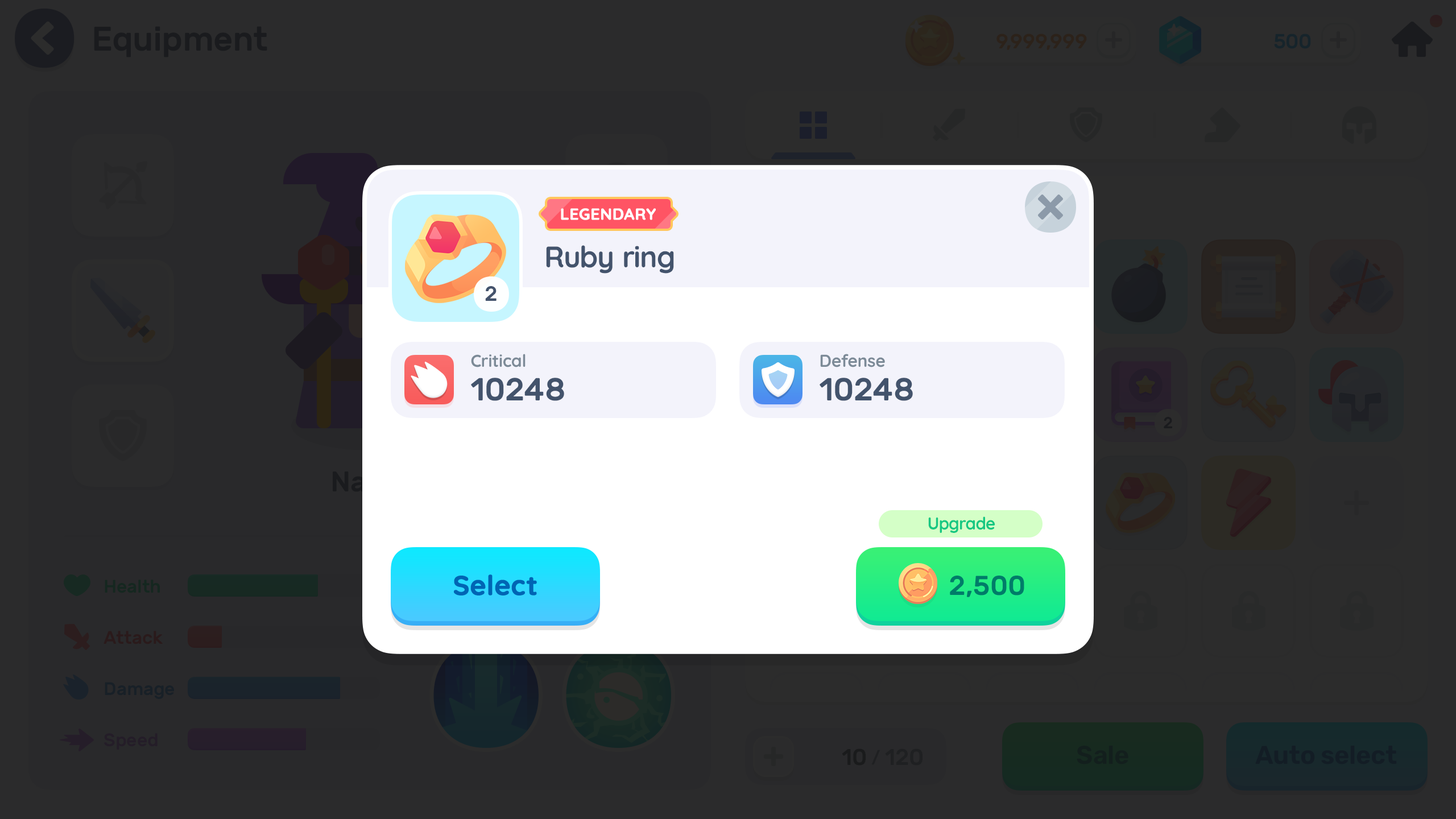
<style>
.page{position:relative;width:1456px;height:819px;background:#2b2b2c}
.page>*{position:absolute;margin:0}
.t1{font:15.9px "Quicksand-Bold";letter-spacing:0.01em;color:#ffffff;text-transform:uppercase;font-weight:bold}
.t2{font:29.6px "Quicksand-Bold";letter-spacing:-0.01em;color:#43536c}
.t3{font:20.7px "Rubik-Medium";letter-spacing:-0.01em;color:#43536c}
.t4{font:17.1px "Quicksand-Bold";letter-spacing:-0.01em;color:#7c8a97}
.t5{font:31.8px "Rubik-Medium";letter-spacing:-0.01em;color:#43536c;text-transform:uppercase}
.t6{font:17.1px "Quicksand-Bold";letter-spacing:-0.01em;color:#16c882}
.t7{font:27.3px "Quicksand-Bold";color:#0065b4;font-weight:bold}
.t8{font:27.3px "Rubik-Medium";color:#007c69}
</style>
<div class="page">
<p class="t1" style="left:561px;top:208px;width:95px;height:12px">Legendary</p>
<p class="t2" style="left:546px;top:245px;width:128px;height:29px">Ruby ring</p>
<p class="t3" style="left:485px;top:286px;width:12px;height:15px">2</p>
<p class="t4" style="left:471px;top:354px;width:55px;height:13px">Critical</p>
<p class="t4" style="left:820px;top:354px;width:65px;height:13px">Defense</p>
<p class="t5" style="left:471px;top:378px;width:93px;height:23px">10248</p>
<p class="t5" style="left:820px;top:378px;width:93px;height:23px">10248</p>
<p class="t6" style="left:928px;top:516px;width:67px;height:17px">Upgrade</p>
<p class="t7" style="left:454px;top:574px;width:83px;height:21px">Select</p>
<p class="t8" style="left:950px;top:576px;width:74px;height:21px">2,500</p>
</div>
